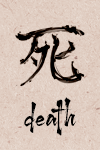
<style>
.page{position:relative;width:100px;height:150px}
.page>*{position:absolute;margin:0}
.t1{font:36px "Harukaze-Demo";color:#000000}
</style>
<div class="page">
<p class="t1" style="left:24px;top:97px;width:53px;height:39px">death</p>
</div>
